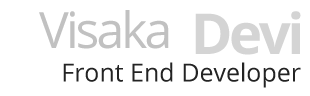
<style>
.page{position:relative;width:310px;height:96px;background:#ffffff}
.page>*{position:absolute;margin:0}
.t1{font:50px "OpenSans";letter-spacing:-0.06em;color:#c1c1c1}
.t2{font:56.1px "OpenSans-Bold";letter-spacing:-0.06em;color:#d4d4d4}
.t3{font:25px "OpenSans";color:#232323}
</style>
<div class="page">
<p class="t1" style="left:39px;top:10px;width:130px;height:39px">Visaka</p>
<p class="t2" style="left:195px;top:11px;width:106px;height:44px">Devi</p>
<p class="t3" style="left:63px;top:62px;width:238px;height:26px">Front End Developer</p>
</div>
